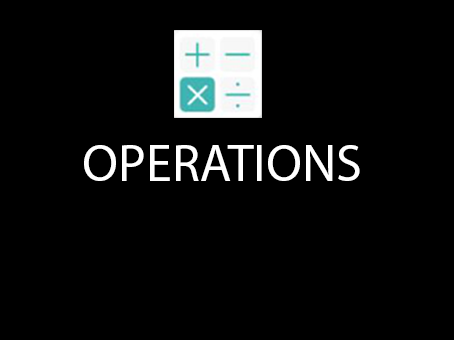
<style>
.page{position:relative;width:454px;height:340px;background:#000000}
.page>*{position:absolute;margin:0}
.t1{font:52px "MyriadPro-Regular";color:#ffffff}
</style>
<div class="page">
<p class="t1" style="left:84px;top:145px;width:276px;height:36px">OPERATIONS</p>
</div>
